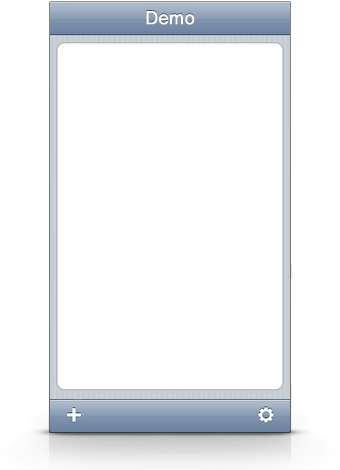
<style>
.page{position:relative;width:340px;height:470px;background:#ffffff}
.page>*{position:absolute;margin:0}
.t1{font:18px "ArialMT";font-weight:bold}
.t2{font:18px "ArialMT";color:#fefefe;font-weight:bold}
</style>
<div class="page">
<p class="t1" style="left:146px;top:10px;width:49px;height:14px">Demo</p>
<p class="t2" style="left:146px;top:11px;width:49px;height:14px">Demo</p>
</div>
